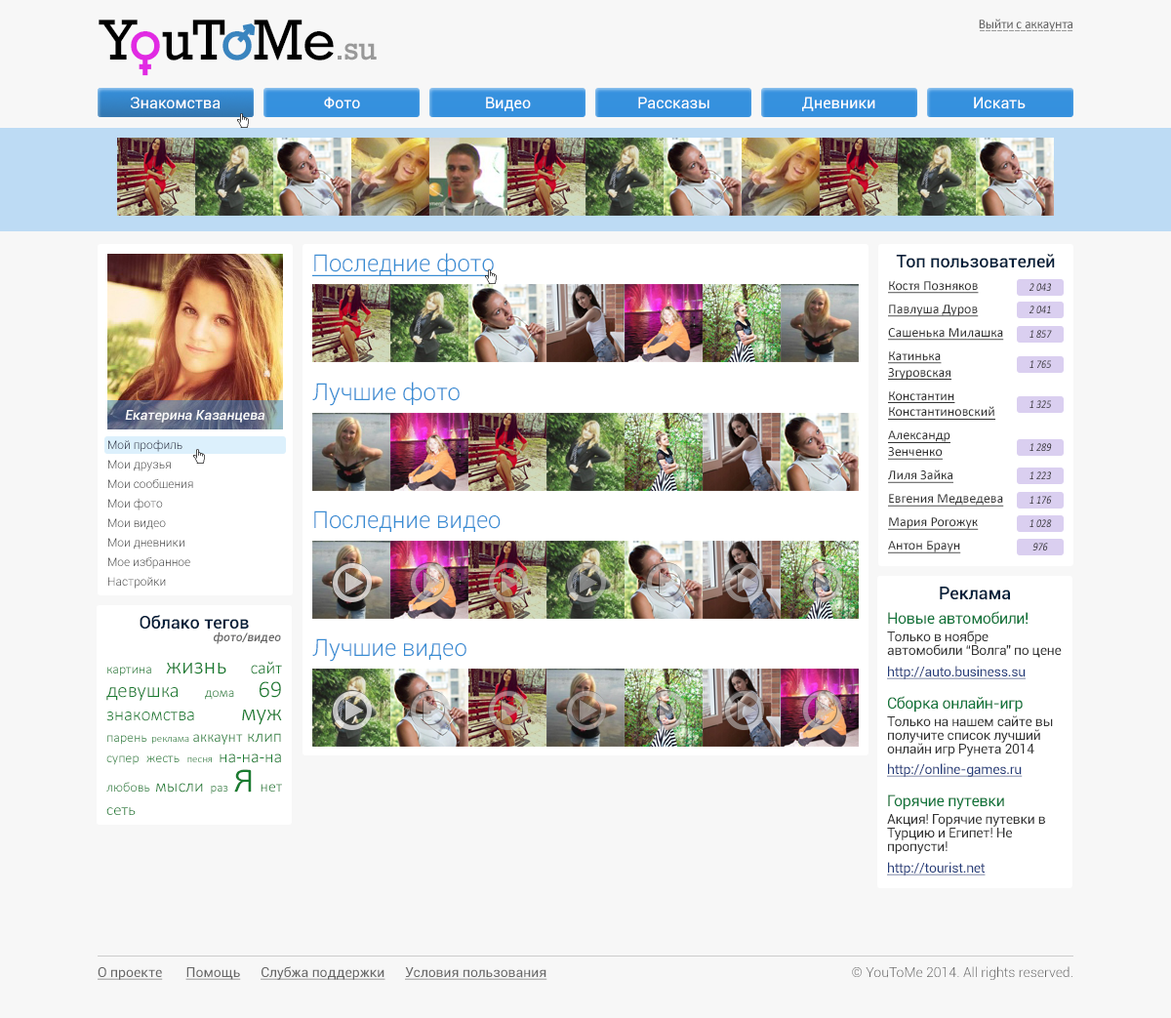
<style>
.page{position:relative;width:1171px;height:1018px;background:#f7f7f7}
.page>*{position:absolute;margin:0}
.t1{font:33.4px "Rockwell";letter-spacing:-0.02em;color:#999999}
.t2{font:58.5px "Rockwell";letter-spacing:-0.02em;color:#000000}
.t3{font:58.5px "Rockwell";letter-spacing:-0.02em;color:#e12ae3}
.t4{font:58.5px "Rockwell";letter-spacing:-0.02em;color:#3a85bf}
.t5{font:13.7px "Calibri";letter-spacing:-0.02em;color:#666666}
.t6{font:15.6px "Roboto-Regular";color:#ffffff}
.t7{font:23.4px "Roboto-Light";color:#378cd3;text-decoration:underline}
.t8{font:17.6px "Roboto-Medium";color:#041f3a}
.t9{font:13.7px "Calibri";color:#333333;text-decoration:underline}
.t10{font:11.7px "Calibri-Italic";color:#2d2d2d;scale:0.83 1}
.t11{font:11.7px "Calibri-Italic";scale:0.83 1}
.t12{font:23.4px "Roboto-Light";color:#378cd3}
.t13{font:13.7px "Roboto-MediumItalic";color:#f9f9f9}
.t14{font:11.7px/19.5px "Roboto-Light";color:#333333}
.t15{font:11.7px/19.5px "Roboto-Light";color:#080a29}
.t16{font:15.6px "Roboto-Regular";letter-spacing:-0.02em;color:#11753b}
.t17{font:11.7px "Roboto-MediumItalic";color:#666666}
.t18{font:13.7px/13.7px "Roboto-Regular";letter-spacing:-0.02em;color:#333333}
.t19{font:13.7px "Calibri-Light";color:#197b30}
.t20{font:23.4px "Calibri-Light";color:#197b30}
.t21{font:17.6px "Calibri-Light";color:#197b30}
.t22{font:20.5px/23.4px "Calibri-Light";color:#197b30}
.t23{font:13.7px/23.4px "Calibri-Light";color:#197b30}
.t24{font:23.4px/23.4px "Calibri-Light";color:#197b30}
.t25{font:18.5px/23.4px "Calibri-Light";color:#197b30}
.t26{font:10.7px "Calibri-Light";color:#197b30}
.t27{font:15.6px "Calibri-Light";color:#197b30}
.t28{font:12.7px/29.3px "Calibri-Light";color:#197b30}
.t29{font:46.9px/29.3px "Calibri-Light";color:#197b30}
.t30{font:15.6px/29.3px "Calibri-Light";color:#197b30}
.t31{font:16.6px/23.4px "Calibri-Light";color:#197b30}
.t32{font:13.7px "Roboto-Regular";letter-spacing:-0.02em;color:#233c7a;text-decoration:underline}
.t33{font:13.7px "Roboto-Regular";color:#666666;text-decoration:underline}
.t34{font:13.7px "Roboto-Light";color:#666666}
</style>
<div class="page">
<p class="t1" style="left:99px;top:20px;width:278px;height:41px"><span class="t2">Y</span><span class="t3">o</span><span class="t2">uT</span><span class="t4">o</span><span class="t2">Me</span>.su</p>
<p class="t5" style="left:979px;top:19px;width:94px;height:12px">Выйти с аккаунта</p>
<p class="t6" style="left:131px;top:97px;width:90px;height:12px">Знакомства</p>
<p class="t6" style="left:324px;top:97px;width:36px;height:11px">Фото</p>
<p class="t6" style="left:486px;top:97px;width:45px;height:14px">Видео</p>
<p class="t6" style="left:638px;top:97px;width:72px;height:12px">Рассказы</p>
<p class="t6" style="left:802px;top:97px;width:74px;height:14px">Дневники</p>
<p class="t6" style="left:974px;top:97px;width:52px;height:12px">Искать</p>
<p class="t7" style="left:312px;top:253px;width:183px;height:23px">Последние фото</p>
<p class="t8" style="left:896px;top:254px;width:159px;height:14px">Топ пользователей</p>
<p class="t9" style="left:888px;top:281px;width:116px;height:272px">Костя Позняков<br><br>Павлуша Дуров<br><br>Сашенька Милашка<br><br>Катинька Згуровская<br><br>Константин Константиновский<br><br>Александр Зенченко<br><br>Лиля Зайка<br><br>Евгения Медведева<br><br>Мария Рогожук<br><br>Антон Браун</p>
<p class="t10" style="left:1030px;top:283px;width:21px;height:8px">2 043</p>
<p class="t10" style="left:1030px;top:306px;width:21px;height:7px">2 041</p>
<p class="t11" style="left:1030px;top:330px;width:22px;height:8px">1 857</p>
<p class="t11" style="left:1030px;top:360px;width:21px;height:8px">1 765</p>
<p class="t12" style="left:312px;top:382px;width:148px;height:24px">Лучшие фото</p>
<p class="t11" style="left:1030px;top:400px;width:21px;height:8px">1 325</p>
<p class="t13" style="left:125px;top:410px;width:140px;height:13px">Екатерина Казанцева</p>
<p class="t14" style="left:108px;top:439px;width:85px;height:150px;text-align:justify"><span class="t15">Мой профиль<br></span>Мои друзья<br>Мои сообщения<br>Мои фото<br>Мои видео<br>Мои дневники<br>Мое избранное<br>Настройки</p>
<p class="t11" style="left:1030px;top:443px;width:22px;height:8px">1 289</p>
<p class="t11" style="left:1030px;top:471px;width:21px;height:8px">1 223</p>
<p class="t10" style="left:1030px;top:496px;width:22px;height:8px">1 176</p>
<p class="t12" style="left:314px;top:510px;width:187px;height:22px">Последние видео</p>
<p class="t11" style="left:1030px;top:519px;width:22px;height:8px">1 028</p>
<p class="t11" style="left:1033px;top:543px;width:15px;height:8px">976</p>
<p class="t8" style="left:940px;top:587px;width:71px;height:13px">Реклама</p>
<p class="t8" style="left:140px;top:615px;width:109px;height:15px">Облако тегов</p>
<p class="t16" style="left:888px;top:611px;width:140px;height:14px">Новые автомобили!</p>
<p class="t17" style="left:214px;top:632px;width:67px;height:12px">фото/видео</p>
<p class="t12" style="left:312px;top:638px;width:155px;height:24px">Лучшие видео</p>
<p class="t18" style="left:887px;top:631px;width:175px;height:27px">Только в ноябре автомобили “Волга” по цене “Жигулей”</p>
<p class="t19" style="left:106px;top:661px;width:176px;height:154px;text-align:justify">картина <span class="t20">жизнь </span><span class="t21">сайт </span><span class="t22">девушка </span><span class="t23">дома </span><span class="t24">69 </span><span class="t25">знакомства </span><span class="t24">муж </span>парень <span class="t26">реклама </span><span class="t27">аккаунт </span><span class="t21">клип </span>супер жесть <span class="t26">песня </span><span class="t21">на-на-на </span>любовь <span class="t21">мысли </span><span class="t28">раз </span><span class="t29">я </span><span class="t30">нет </span><span class="t31">сеть</span></p>
<p class="t32" style="left:887px;top:666px;width:139px;height:13px">http://auto.business.su</p>
<p class="t16" style="left:888px;top:696px;width:135px;height:17px">Сборка онлайн-игр</p>
<p class="t18" style="left:887px;top:715px;width:166px;height:41px">Только на нашем сайте вы получите список лучший онлайн игр Рунета 2014 года</p>
<p class="t32" style="left:887px;top:763px;width:136px;height:14px">http://online-games.ru</p>
<p class="t16" style="left:888px;top:795px;width:116px;height:15px">Горячие путевки</p>
<p class="t18" style="left:887px;top:814px;width:158px;height:40px">Акция! Горячие путевки в Турцию и Египет! Не пропусти!</p>
<p class="t32" style="left:887px;top:862px;width:99px;height:14px">http://tourist.net</p>
<p class="t33" style="left:98px;top:966px;width:450px;height:14px">О проекте       Помощь      Слубжа поддержки      Условия пользования</p>
<p class="t34" style="left:852px;top:966px;width:221px;height:14px">© YouToMe 2014. All rights reserved.</p>
</div>
